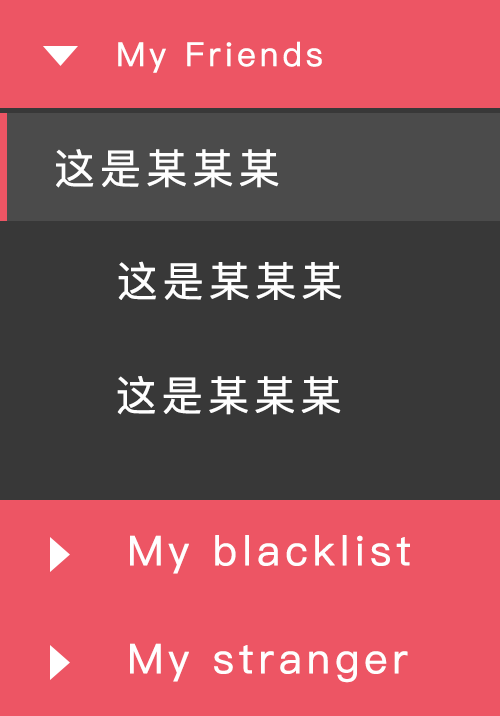
<style>
.page{position:relative;width:500px;height:716px;background:#ed5564}
.page>*{position:absolute;margin:0}
.t1{font:33px "PingFang-SC-Medium";letter-spacing:0.1em;color:#fefefe;font-weight:bold}
.t2{font:41px "PingFang-SC-Medium";letter-spacing:0.1em;color:#fefefe;font-weight:bold}
.t3{font:41.1px "PingFang-SC-Medium";letter-spacing:0.1em;color:#fefefe;font-weight:bold}
</style>
<div class="page">
<p class="t1" style="left:118px;top:41px;width:204px;height:32px">My Friends</p>
<p class="t2" style="left:56px;top:149px;width:223px;height:39px">这是某某某</p>
<p class="t3" style="left:118px;top:261px;width:224px;height:39px">这是某某某</p>
<p class="t3" style="left:117px;top:376px;width:224px;height:39px">这是某某某</p>
<p class="t2" style="left:130px;top:535px;width:280px;height:39px">My blacklist</p>
<p class="t2" style="left:130px;top:643px;width:278px;height:40px">My stranger</p>
</div>
